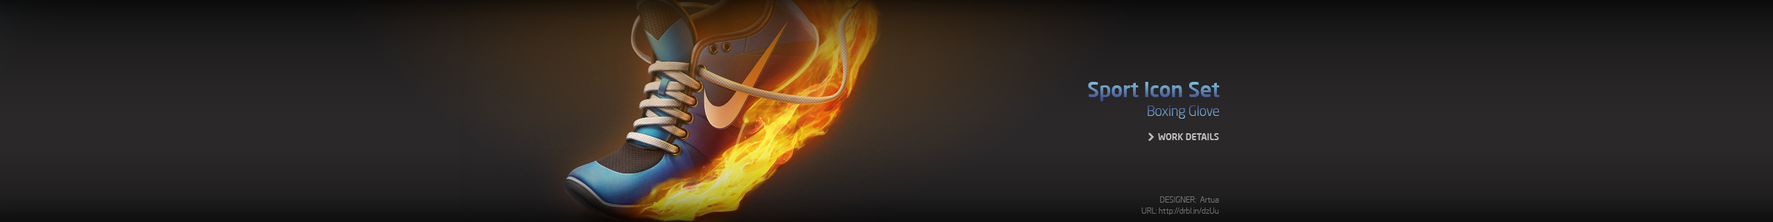
<style>
.page{position:relative;width:1773px;height:222px}
.page>*{position:absolute;margin:0}
.t1{font:20.8px "NeoSansPro-Medium";letter-spacing:-0.005em}
.t2{font:13.8px "NeoSansPro-Light";letter-spacing:-0.005em}
.t3{font:9px "NeoSansPro-Medium";letter-spacing:-0.005em;color:#c0bfbf}
.t4{font:8.3px "NeoSansPro-Light";letter-spacing:-0.005em;color:#777777}
.t5{font:8.3px "NeoSansPro-Light";letter-spacing:-0.005em;color:#737373}
</style>
<div class="page">
<p class="t1" style="left:1088px;top:82px;width:131px;height:19px">Sport Icon Set</p>
<p class="t2" style="left:1147px;top:105px;width:72px;height:13px">Boxing Glove</p>
<p class="t3" style="left:1158px;top:133px;width:61px;height:7px">WORK DETAILS</p>
<p class="t4" style="left:1160px;top:196px;width:59px;height:6px">DESIGNER:  Artua</p>
<p class="t5" style="left:1141px;top:207px;width:78px;height:8px">URL: http://drbl.in/dzUu</p>
</div>
